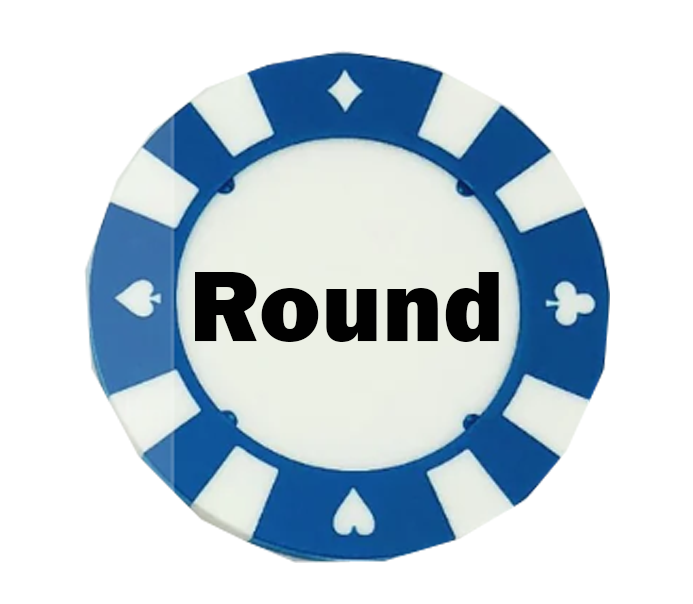
<style>
.page{position:relative;width:693px;height:604px;background:#ffffff}
.page>*{position:absolute;margin:0}
.t1{font:104px "FranklinGothic-Heavy";color:#010101}
</style>
<div class="page">
<p class="t1" style="left:195px;top:272px;width:304px;height:70px">Round</p>
</div>
